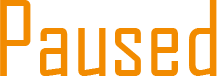
<style>
.page{position:relative;width:217px;height:76px;background:#ffffff}
.page>*{position:absolute;margin:0}
.t1{font:100px "AgencyFB-Reg";color:#f28b00}
</style>
<div class="page">
<p class="t1" style="left:0px;top:0px;width:217px;height:76px">Paused</p>
</div>
